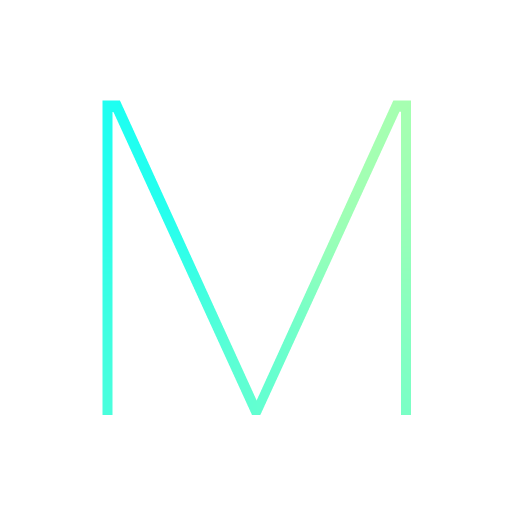
<style>
.page{position:relative;width:512px;height:512px;background:#ffffff}
.page>*{position:absolute;margin:0}
.t1{font:444px "AvenirNext-UltraLight"}
</style>
<div class="page">
<p class="t1" style="left:102px;top:100px;width:309px;height:315px">M</p>
</div>
